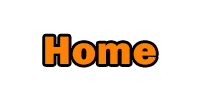
<style>
.page{position:relative;width:200px;height:100px;background:#ffffff}
.page>*{position:absolute;margin:0}
.t1{font:40.6px "FranklinGothic-Heavy";letter-spacing:0.025em;color:#ff8400}
</style>
<div class="page">
<p class="t1" style="left:45px;top:36px;width:111px;height:29px">Home</p>
</div>
